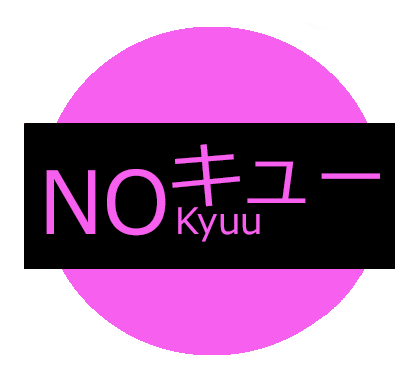
<style>
.page{position:relative;width:416px;height:375px;background:#ffffff}
.page>*{position:absolute;margin:0}
.t1{font:72.4px "Meiryo";color:#f760ee}
.t2{font:86.8px "Meiryo";color:#f760ee}
.t3{font:36.2px "Meiryo";color:#f760ee}
</style>
<div class="page">
<p class="t1" style="left:172px;top:144px;width:208px;height:63px">キュー</p>
<p class="t2" style="left:46px;top:169px;width:120px;height:67px">NO</p>
<p class="t3" style="left:178px;top:207px;width:82px;height:35px">Kyuu</p>
</div>
